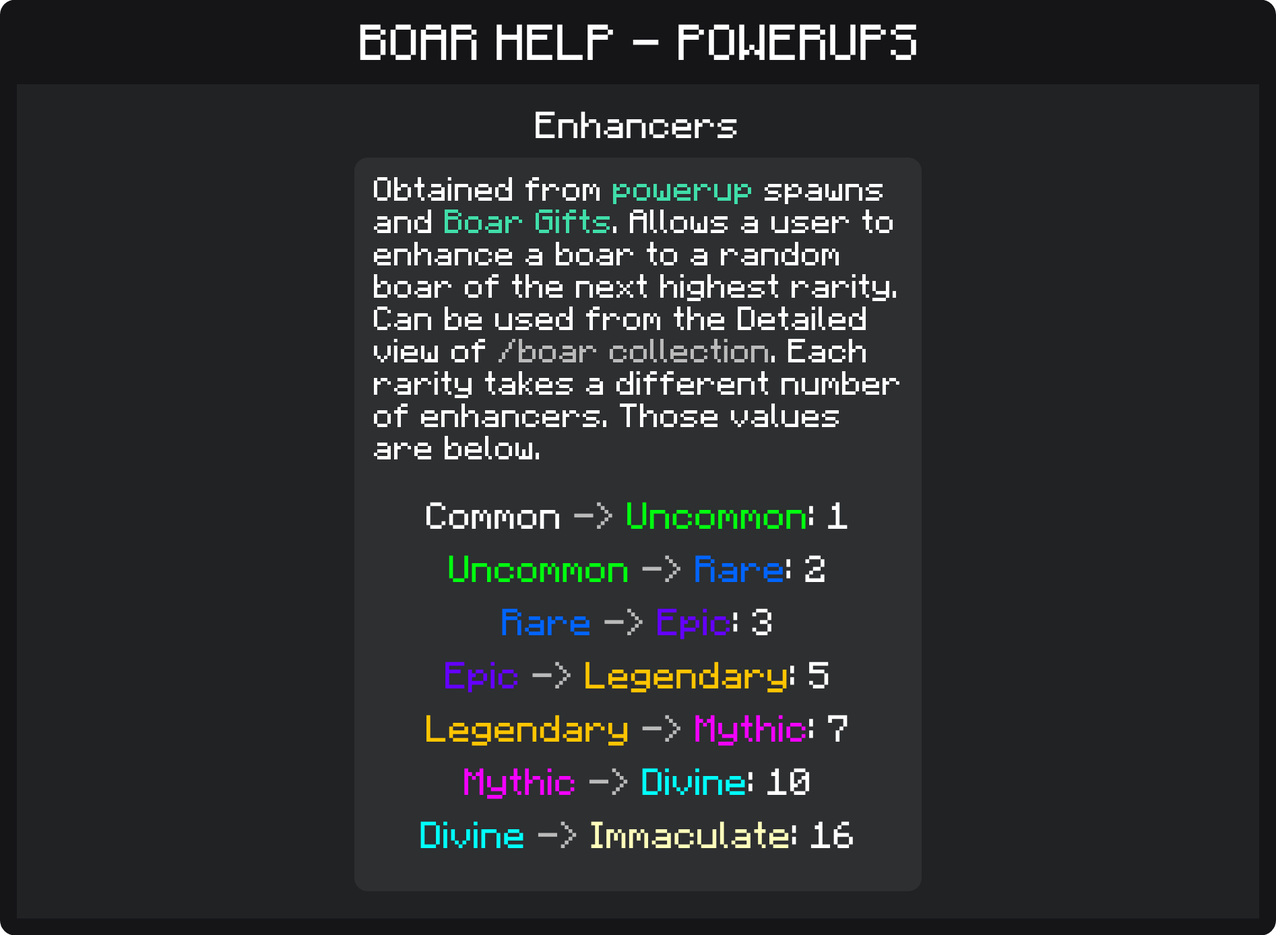
<style>
.page{position:relative;width:1276px;height:935px;background:#212224}
.page>*{position:absolute;margin:0}
.t1{font:40.4px "F77-Minecraft";color:#ffffff}
.t2{font:30.3px "F77-Minecraft";color:#ffffff}
.t3{font:26.9px "F77-Minecraft";color:#ffffff}
.t4{font:26.9px "F77-Minecraft";color:#40dea9}
.t5{font:26.9px "F77-Minecraft";color:#bababa}
.t6{font:30.3px/53.2px "F77-Minecraft";color:#fffebb}
.t7{font:30.3px/53.2px "F77-Minecraft";color:#ffffff}
.t8{font:30.3px/53.2px "F77-Minecraft";color:#bababa}
.t9{font:30.3px/53.2px "F77-Minecraft";color:#00ff0f}
.t10{font:30.3px/53.2px "F77-Minecraft";color:#0064ff}
.t11{font:30.3px/53.2px "F77-Minecraft";color:#6400ff}
.t12{font:30.3px/53.2px "F77-Minecraft";color:#ffc500}
.t13{font:30.3px/53.2px "F77-Minecraft";color:#f300ff}
.t14{font:30.3px/53.2px "F77-Minecraft";color:#00fffb}
</style>
<div class="page">
<p class="t1" style="left:360px;top:24px;width:556px;height:36px">BOAR HELP - POWERUPS</p>
<p class="t2" style="left:535px;top:111px;width:202px;height:27px">Enhancers</p>
<p class="t3" style="left:374px;top:177px;width:525px;height:282px">Obtained from <span class="t4">powerup</span> spawns<br>and <span class="t4">Boar Gifts</span>. Allows a user to<br>enhance a boar to a random<br>boar of the next highest rarity.<br>Can be used from the Detailed<br>view of <span class="t5">/boar collection</span>. Each<br>rarity takes a different number<br>of enhancers. Those values<br>are below.</p>
<p class="t6" style="left:420px;top:502px;width:433px;height:346px;text-align:center"><span class="t7">Common </span><span class="t8">-&gt; </span><span class="t9">Uncommon</span><span class="t7">: 1<br></span><span class="t9">Uncommon </span><span class="t8">-&gt; </span><span class="t10">Rare</span><span class="t7">: 2<br></span><span class="t10">Rare </span><span class="t8">-&gt; </span><span class="t11">Epic</span><span class="t7">: 3<br></span><span class="t11">Epic </span><span class="t8">-&gt; </span><span class="t12">Legendary</span><span class="t7">: 5<br></span><span class="t12">Legendary </span><span class="t8">-&gt; </span><span class="t13">Mythic</span><span class="t7">: 7<br></span><span class="t13">Mythic </span><span class="t8">-&gt; </span><span class="t14">Divine</span><span class="t7">: 10<br></span><span class="t14">Divine </span><span class="t8">-&gt; </span>Immaculate<span class="t7">: 16</span></p>
</div>
